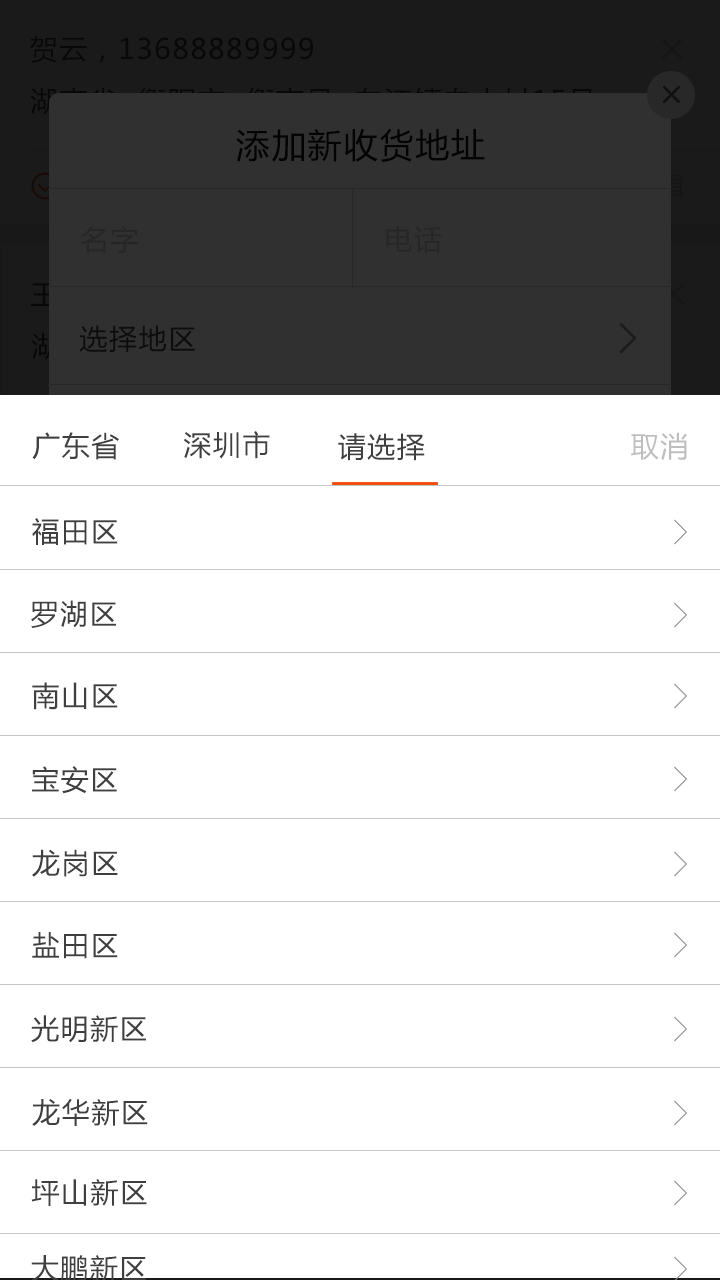
<style>
.page{position:relative;width:720px;height:1280px;background:#ffffff}
.page>*{position:absolute;margin:0}
.t1{font:28px "MicrosoftYaHei";letter-spacing:0.055em;color:#3f3f3f;text-transform:uppercase}
.t2{font:28px "MicrosoftYaHei";letter-spacing:0.055em;color:#bfbfbf;text-transform:uppercase}
</style>
<div class="page">
<p class="t1" style="left:32px;top:432px;width:87px;height:28px">广东省</p>
<p class="t1" style="left:183px;top:431px;width:87px;height:28px">深圳市</p>
<p class="t1" style="left:338px;top:433px;width:87px;height:28px">请选择</p>
<p class="t2" style="left:631px;top:432px;width:56px;height:28px">取消</p>
<p class="t1" style="left:32px;top:518px;width:86px;height:27px">福田区</p>
<p class="t1" style="left:31px;top:600px;width:85px;height:28px">罗湖区</p>
<p class="t1" style="left:32px;top:682px;width:86px;height:28px">南山区</p>
<p class="t1" style="left:32px;top:766px;width:85px;height:28px">宝安区</p>
<p class="t1" style="left:32px;top:849px;width:86px;height:28px">龙岗区</p>
<p class="t1" style="left:32px;top:932px;width:86px;height:27px">盐田区</p>
<p class="t1" style="left:31px;top:1015px;width:115px;height:28px">光明新区</p>
<p class="t1" style="left:32px;top:1098px;width:116px;height:28px">龙华新区</p>
<p class="t1" style="left:31px;top:1179px;width:116px;height:27px">坪山新区</p>
<p class="t1" style="left:31px;top:1255px;width:115px;height:27px">大鹏新区</p>
</div>
